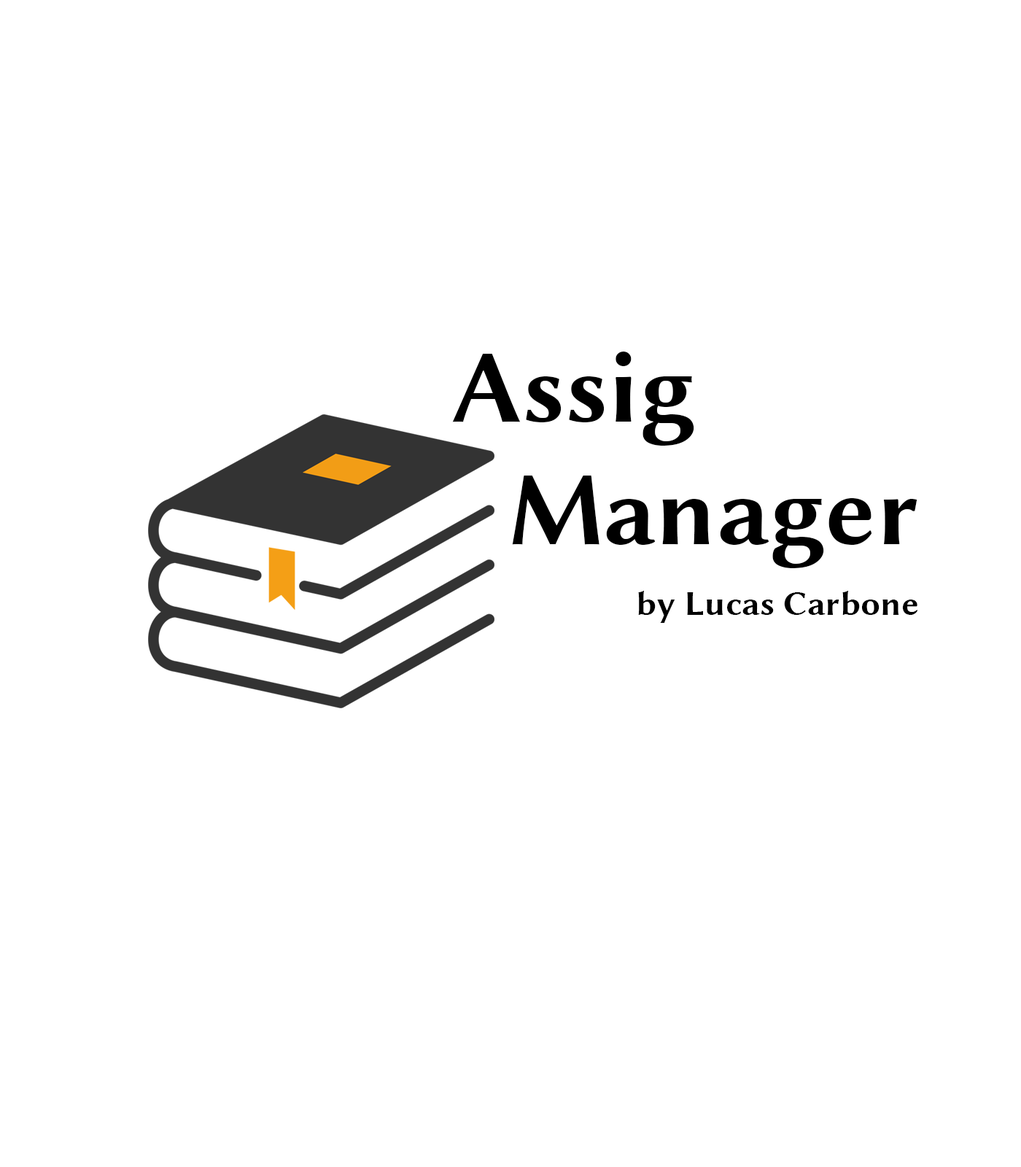
<style>
.page{position:relative;width:1021px;height:1167px;background:#ffffff}
.page>*{position:absolute;margin:0}
.t1{font:102.1px "LinuxBiolinumGB";color:#000000}
.t2{font:35px "LinuxBiolinumGB";color:#000000}
</style>
<div class="page">
<p class="t1" style="left:452px;top:352px;width:466px;height:216px">Assig<br>Manager</p>
<p class="t2" style="left:638px;top:591px;width:280px;height:32px">by Lucas Carbone</p>
</div>
